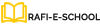
<style>
.page{position:relative;width:100px;height:25px;background:#ffffff}
.page>*{position:absolute;margin:0}
.t1{font:9px "Raleway-SemiBold";color:#1a1a19;font-weight:bold}
</style>
<div class="page">
<p class="t1" style="left:28px;top:13px;width:73px;height:8px">RAFI-E-SCHOOL</p>
</div>
